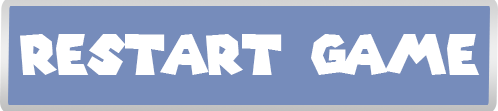
<style>
.page{position:relative;width:498px;height:111px;background:#768cbb}
.page>*{position:absolute;margin:0}
.t1{font:54.8px "SuperMarioGalaxy";color:#ffffff}
</style>
<div class="page">
<p class="t1" style="left:20px;top:34px;width:460px;height:41px">restart game</p>
</div>
